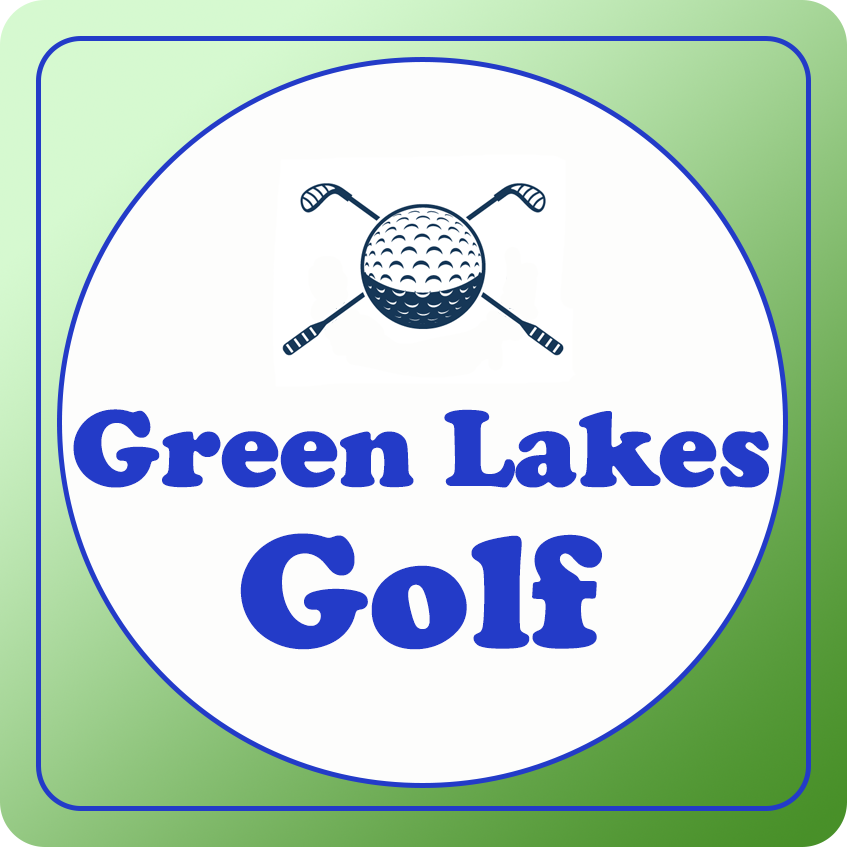
<style>
.page{position:relative;width:847px;height:847px;background:#fdfdfc}
.page>*{position:absolute;margin:0}
.t1{font:112.5px "CooperBlack";color:#233bc8}
.t2{font:166.7px "CooperBlack";color:#233bc8}
</style>
<div class="page">
<p class="t1" style="left:73px;top:409px;width:696px;height:79px">Green Lakes</p>
<p class="t2" style="left:240px;top:533px;width:362px;height:117px"><span class="t1"><br>      </span>Golf</p>
</div>
